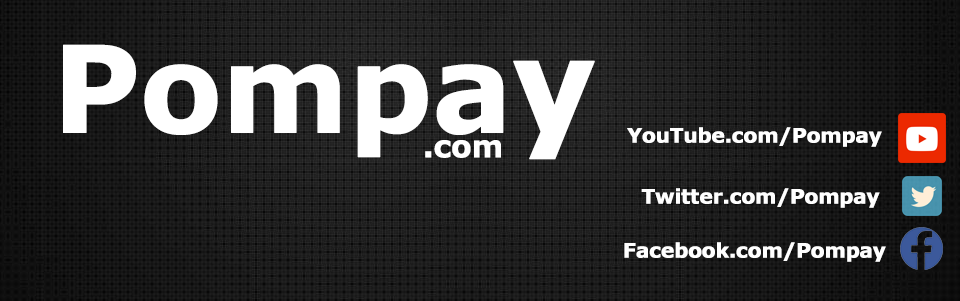
<style>
.page{position:relative;width:960px;height:301px}
.page>*{position:absolute;margin:0}
.t1{font:120px "Verdana-Bold";letter-spacing:-0.03em;color:#ffffff;font-weight:bold}
.t2{font:130px "Verdana-Bold";letter-spacing:-0.03em;color:#ffffff;font-weight:bold}
.t3{font:20px "Verdana-Bold";letter-spacing:-0.03em;color:#ffffff;font-weight:bold}
.t4{font:30px "Verdana-Bold";letter-spacing:-0.03em;color:#ffffff;font-weight:bold}
</style>
<div class="page">
<p class="t1" style="left:63px;top:44px;width:532px;height:116px">Pompa<span class="t2">y</span></p>
<p class="t3" style="left:627px;top:127px;width:255px;height:20px">YouTube.com/Pompay</p>
<p class="t4" style="left:425px;top:140px;width:76px;height:18px">.com</p>
<p class="t3" style="left:641px;top:188px;width:239px;height:20px">Twitter.com/Pompay</p>
<p class="t3" style="left:624px;top:242px;width:262px;height:20px">Facebook.com/Pompay</p>
</div>
